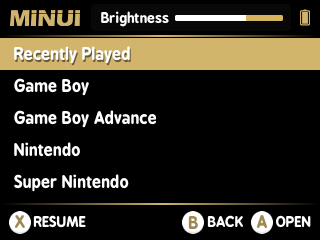
<style>
.page{position:relative;width:320px;height:240px;background:#000000}
.page>*{position:absolute;margin:0}
.t1{font:14px "BPreplay-Bold";color:#ffffff}
.t2{font:16px/32px "BPreplay-Bold";color:#ffffff}
.t3{font:16px "BPreplay-Bold";color:#9f8952}
</style>
<div class="page">
<p class="t1" style="left:101px;top:11px;width:68px;height:16px">Brightness</p>
<p class="t2" style="left:14px;top:46px;width:143px;height:146px">Recently Played<br>Game Boy<br>Game Boy Advance<br>Nintendo<br>Super Nintendo</p>
<p class="t3" style="left:15px;top:215px;width:10px;height:13px">X</p>
<p class="t1" style="left:33px;top:215px;width:53px;height:13px">RESUME</p>
<p class="t3" style="left:188px;top:216px;width:10px;height:13px">B</p>
<p class="t1" style="left:207px;top:215px;width:36px;height:13px">BACK</p>
<p class="t3" style="left:257px;top:215px;width:10px;height:13px">A</p>
<p class="t1" style="left:276px;top:215px;width:35px;height:13px">OPEN</p>
</div>
